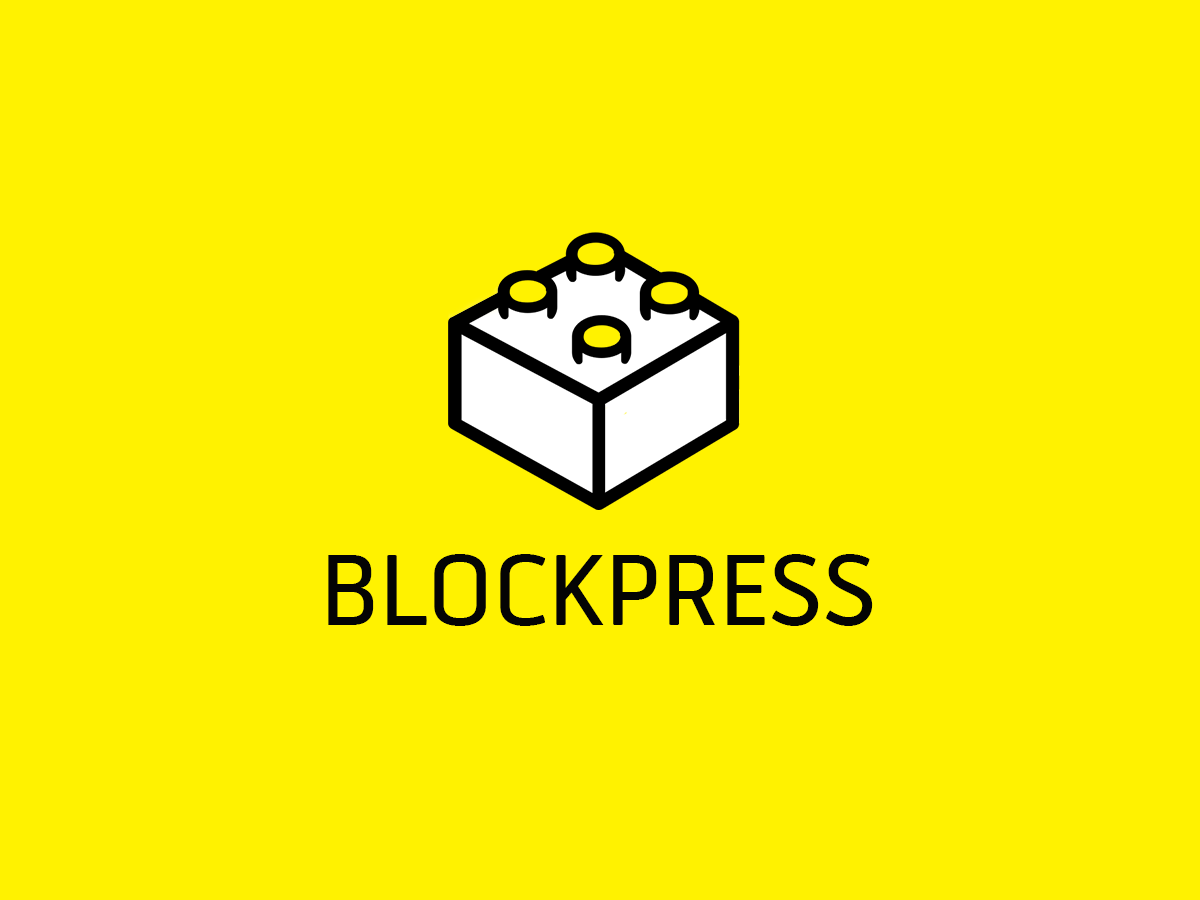
<style>
.page{position:relative;width:1200px;height:900px;background:#fff200}
.page>*{position:absolute;margin:0}
.t1{font:96px "Telenor";color:#040404}
</style>
<div class="page">
<p class="t1" style="left:328px;top:554px;width:545px;height:72px">BLOCKPRESS</p>
</div>
